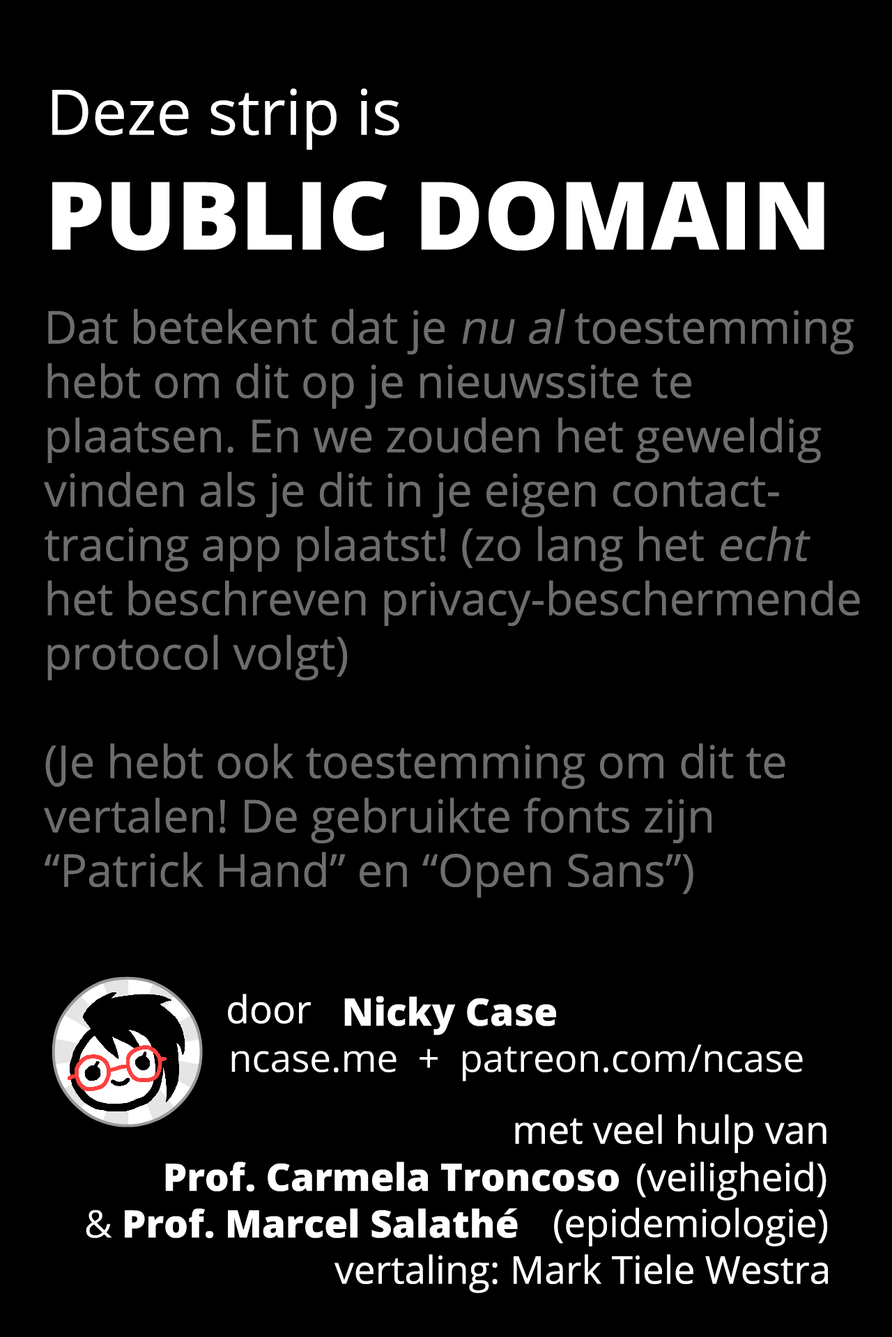
<style>
.page{position:relative;width:892px;height:1337px;background:#000000}
.page>*{position:absolute;margin:0}
.t1{font:62.7px "OpenSans-Regular";color:#ffffff}
.t2{font:45.3px "OpenSans-Regular";color:#6d6d6d}
.t3{font:45.3px "OpenSans-Regular";color:#6d6d6d;font-style:italic}
.t4{font:38.3px "OpenSans-Regular";color:#ffffff}
</style>
<div class="page">
<p class="t1" style="left:52px;top:88px;width:347px;height:62px">Deze strip is</p>
<p class="t2" style="left:44px;top:309px;width:816px;height:589px">Dat betekent dat je <span class="t3">nu al</span> toestemming<br>hebt om dit op je nieuwssite te<br>plaatsen. En we zouden het geweldig<br>vinden als je dit in je eigen contact-<br>tracing app plaatst! (zo lang het <span class="t3">echt<br></span>het beschreven privacy-beschermende<br>protocol volgt)<br><br>(Je hebt ook toestemming om dit te<br>vertalen! De gebruikte fonts zijn <br>“Patrick Hand” en “Open Sans”)</p>
<p class="t4" style="left:228px;top:994px;width:83px;height:30px">door</p>
<p class="t4" style="left:515px;top:1115px;width:311px;height:39px">met veel hulp van</p>
<p class="t4" style="left:637px;top:1162px;width:189px;height:39px">(veiligheid)</p>
<p class="t4" style="left:554px;top:1208px;width:273px;height:39px">(epidemiologie)</p>
<p class="t4" style="left:334px;top:1255px;width:494px;height:39px">vertaling: Mark Tiele Westra</p>
</div>
